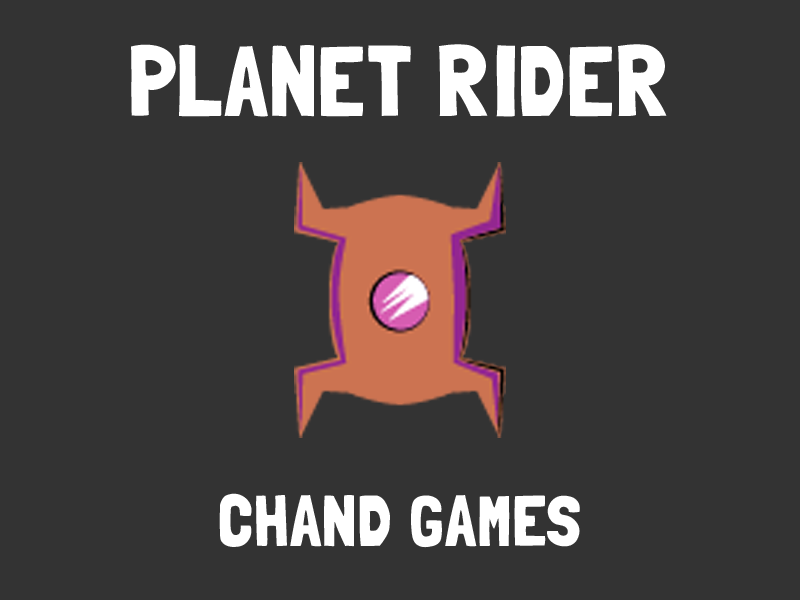
<style>
.page{position:relative;width:800px;height:600px;background:#333333}
.page>*{position:absolute;margin:0}
.t1{font:100px "LondrinaSolid-Regular";color:#ffffff}
.t2{font:72px "LondrinaSolid-Regular";color:#ffffff}
</style>
<div class="page">
<p class="t1" style="left:131px;top:44px;width:536px;height:73px">PLANET RIDER</p>
<p class="t2" style="left:219px;top:493px;width:361px;height:55px">CHAND GAMES</p>
</div>
